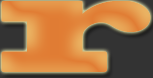
<style>
.page{position:relative;width:153px;height:78px;background:#333333}
.page>*{position:absolute;margin:0}
.t1{font:133.3px "BlackoakStd";color:#e38c41}
.t2{font:242.2px "BlackoakStd";color:#e38c41}
</style>
<div class="page">
<p class="t1" style="left:1px;top:1px;width:150px;height:71px"><span class="t2"> </span>r</p>
</div>
